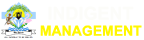
<style>
.page{position:relative;width:144px;height:40px;background:#ffffff}
.page>*{position:absolute;margin:0}
.t1{font:18px "Arial-BoldMT";color:#fcfcf9}
.t2{font:14px "Arial-BoldMT";color:#fff700}
</style>
<div class="page">
<p class="t1" style="left:48px;top:6px;width:86px;height:14px">INDIGENT</p>
<p class="t2" style="left:40px;top:25px;width:102px;height:11px">MANAGEMENT</p>
</div>
